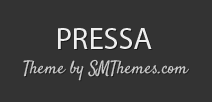
<style>
.page{position:relative;width:212px;height:102px;background:#333333}
.page>*{position:absolute;margin:0}
.t1{font:30.8px "MyriadPro-Regular";color:#eeeeee;text-transform:uppercase}
.t2{font:17.5px "Satisfy";color:#c9c9c9}
</style>
<div class="page">
<p class="t1" style="left:58px;top:28px;width:94px;height:21px">pressa</p>
<p class="t2" style="left:23px;top:59px;width:166px;height:22px">Theme by SMThemes.com</p>
</div>
